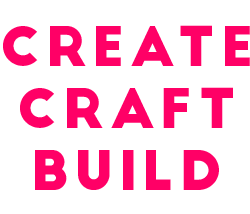
<style>
.page{position:relative;width:250px;height:214px;background:#ffffff}
.page>*{position:absolute;margin:0}
.t1{font:53.5px/61.9px "BigJohn";letter-spacing:0.1em;color:#ff0066;text-transform:uppercase}
</style>
<div class="page">
<p class="t1" style="left:3px;top:25px;width:247px;height:165px;text-align:center">create<br>craft<br>build</p>
</div>
